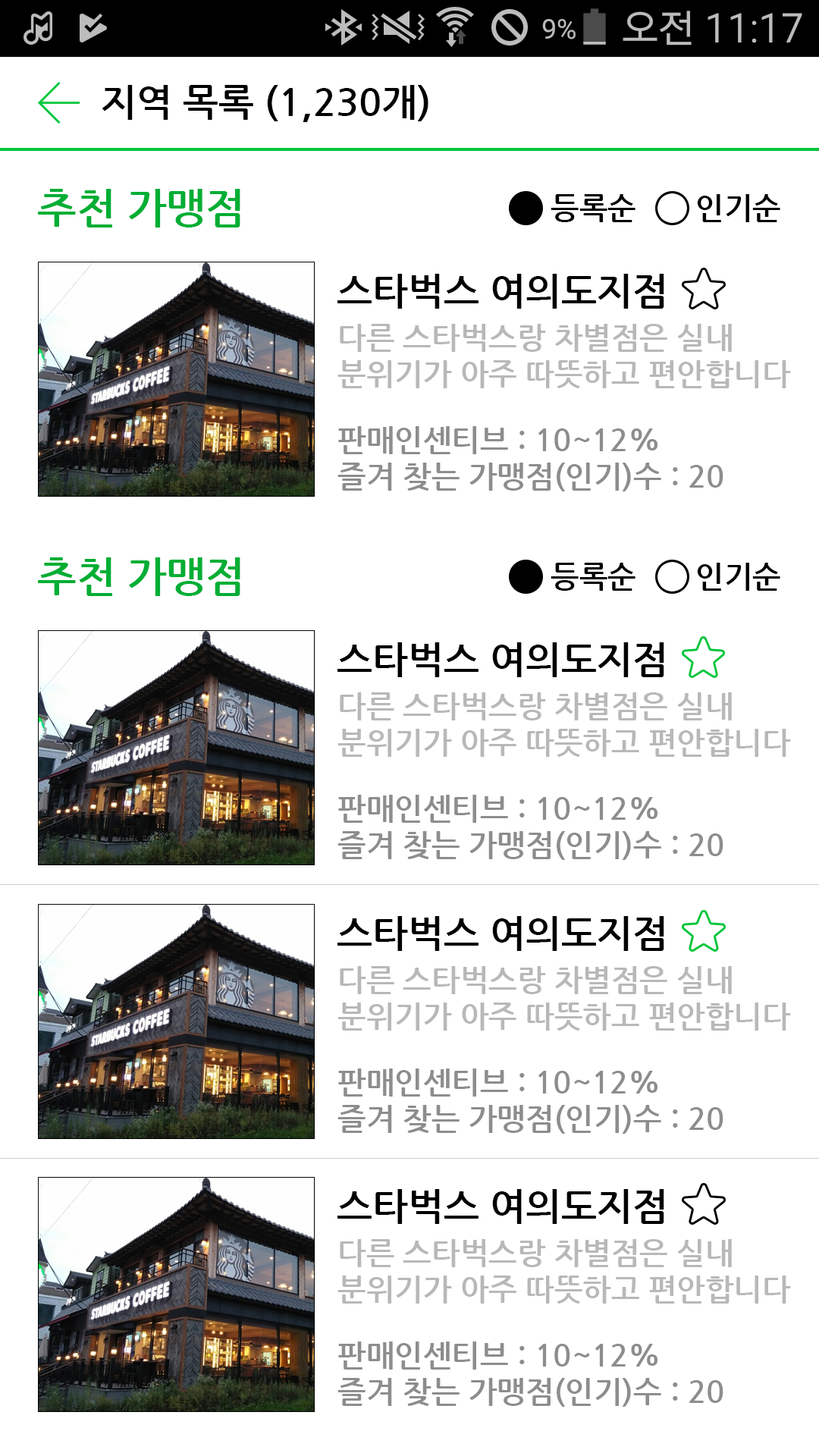
<style>
.page{position:relative;width:819px;height:1456px;background:#ffffff}
.page>*{position:absolute;margin:0}
.t1{font:37.9px "NanumGothicBold";color:#000000}
.t2{font:41.7px "NanumGothicBold";color:#00ae34}
.t3{font:30.3px "NanumGothicBold";color:#000000}
.t4{font:30.3px "NanumGothicBold";color:#b8b8b8}
.t5{font:30.3px "NanumGothicBold";color:#8d8d8d}
</style>
<div class="page">
<p class="t1" style="left:102px;top:85px;width:326px;height:37px">지역 목록 (1,230개)</p>
<p class="t2" style="left:38px;top:189px;width:202px;height:38px">추천 가맹점</p>
<p class="t3" style="left:551px;top:194px;width:229px;height:28px">등록순       인기순</p>
<p class="t1" style="left:337px;top:274px;width:327px;height:35px">스타벅스 여의도지점</p>
<p class="t4" style="left:337px;top:324px;width:454px;height:64px">다른 스타벅스랑 차별점은 실내 <br>분위기가 아주 따뜻하고 편안합니다</p>
<p class="t5" style="left:337px;top:426px;width:386px;height:65px">판매인센티브 : 10~12%<br>즐겨 찾는 가맹점(인기)수 : 20</p>
<p class="t2" style="left:38px;top:557px;width:202px;height:39px">추천 가맹점</p>
<p class="t3" style="left:551px;top:563px;width:229px;height:28px">등록순       인기순</p>
<p class="t1" style="left:337px;top:642px;width:327px;height:35px">스타벅스 여의도지점</p>
<p class="t4" style="left:337px;top:692px;width:454px;height:65px">다른 스타벅스랑 차별점은 실내 <br>분위기가 아주 따뜻하고 편안합니다</p>
<p class="t5" style="left:337px;top:795px;width:386px;height:65px">판매인센티브 : 10~12%<br>즐겨 찾는 가맹점(인기)수 : 20</p>
<p class="t1" style="left:337px;top:916px;width:327px;height:35px">스타벅스 여의도지점</p>
<p class="t4" style="left:337px;top:966px;width:454px;height:65px">다른 스타벅스랑 차별점은 실내 <br>분위기가 아주 따뜻하고 편안합니다</p>
<p class="t5" style="left:337px;top:1068px;width:386px;height:66px">판매인센티브 : 10~12%<br>즐겨 찾는 가맹점(인기)수 : 20</p>
<p class="t1" style="left:337px;top:1189px;width:327px;height:35px">스타벅스 여의도지점</p>
<p class="t4" style="left:337px;top:1239px;width:454px;height:65px">다른 스타벅스랑 차별점은 실내 <br>분위기가 아주 따뜻하고 편안합니다</p>
<p class="t5" style="left:337px;top:1341px;width:386px;height:66px">판매인센티브 : 10~12%<br>즐겨 찾는 가맹점(인기)수 : 20</p>
</div>
